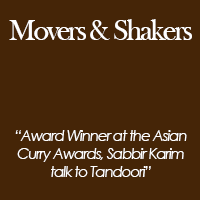
<style>
.page{position:relative;width:200px;height:200px;background:#452507}
.page>*{position:absolute;margin:0}
.t1{font:30px "BaskOldFace";letter-spacing:-0.075em;color:#ffffff}
.t2{font:15px "CenturyGothic-Italic";letter-spacing:-0.075em;color:#ffffff}
</style>
<div class="page">
<p class="t1" style="left:9px;top:19px;width:183px;height:21px">Movers &amp; Shakers</p>
<p class="t2" style="left:15px;top:130px;width:172px;height:47px;text-align:center">“Award Winner at the Asian<br>Curry Awards, Sabbir Karim<br>talk to Tandoori”</p>
</div>
